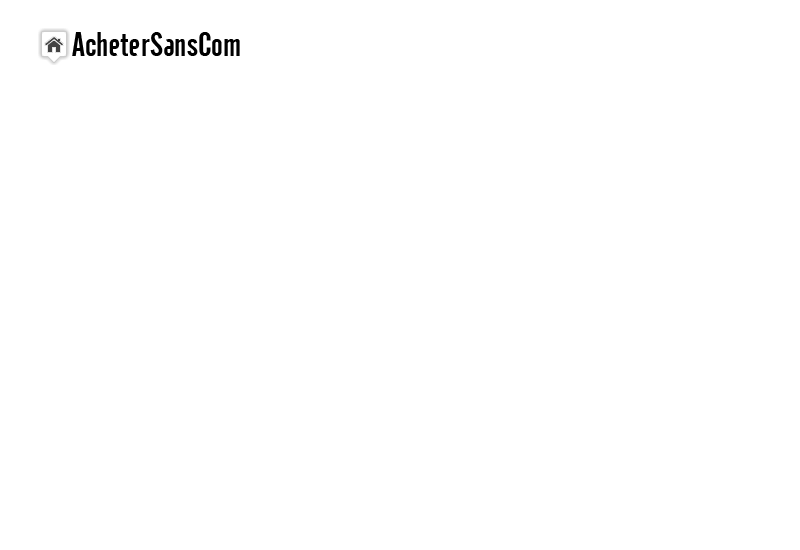
<style>
.page{position:relative;width:800px;height:550px;background:#ffffff}
.page>*{position:absolute;margin:0}
.t1{font:33px "Cafeta";color:#000000}
</style>
<div class="page">
<p class="t1" style="left:72px;top:32px;width:168px;height:24px">AcheterSansCom</p>
</div>
